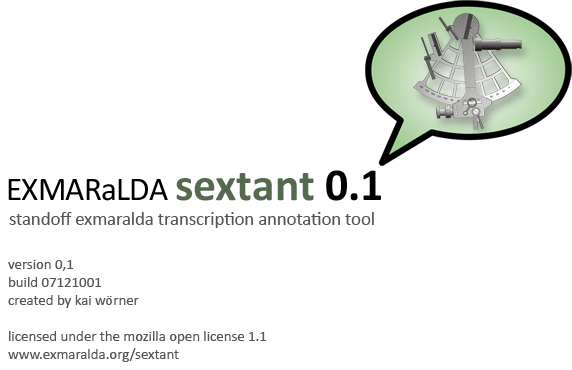
<style>
.page{position:relative;width:572px;height:370px;background:#ffffff}
.page>*{position:absolute;margin:0}
.t1{font:45.9px "Calibri-Bold";color:#54694d}
.t2{font:45.9px "Calibri-Bold";color:#000100}
.t3{font:33.4px "Calibri";letter-spacing:-0.025em;color:#000000}
.t4{font:18.7px "Calibri";letter-spacing:-0.005em;color:#545454}
.t5{font:15px "Calibri";letter-spacing:-0.005em;color:#545454}
</style>
<div class="page">
<p class="t1" style="left:176px;top:170px;width:205px;height:31px">sextant <span class="t2">0.1</span></p>
<p class="t3" style="left:8px;top:179px;width:160px;height:22px">EXMARaLDA</p>
<p class="t4" style="left:9px;top:212px;width:365px;height:16px">standoff exmaralda transcription annotation tool</p>
<p class="t5" style="left:8px;top:260px;width:259px;height:102px">version 0,1<br>build 07121001<br>created by kai wörner<br><br>licensed under the mozilla open license 1.1<br>www.exmaralda.org/sextant</p>
</div>
